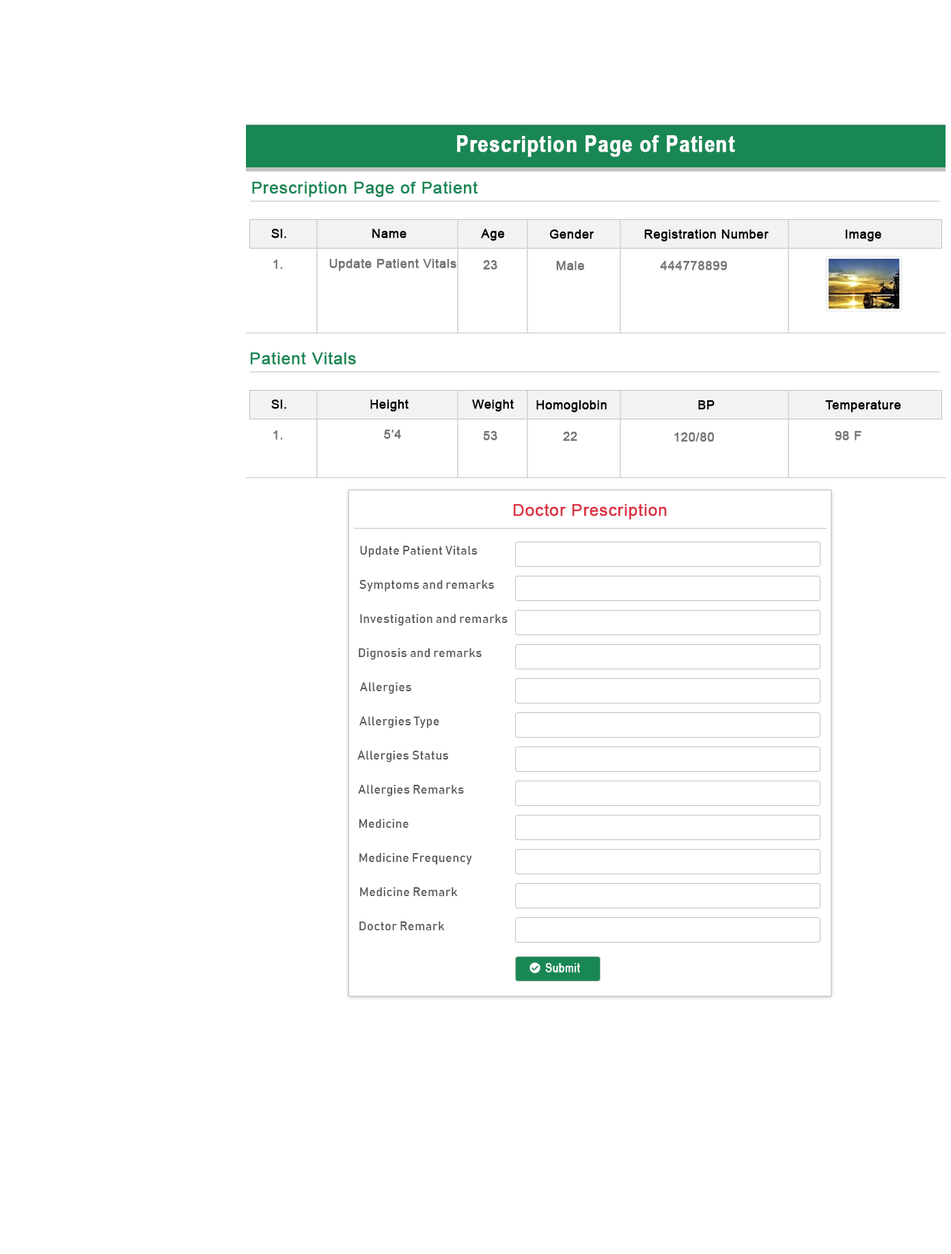
<style>
.page{position:relative;width:951px;height:1254px;background:#ffffff}
.page>*{position:absolute;margin:0}
.t1{font:22.5px "ArialNarrow-Bold";letter-spacing:0.025em;color:#ffffff;font-weight:bold}
.t2{font:16.4px "ArialMT";letter-spacing:0.025em;color:#198754;font-weight:bold}
.t3{font:12.3px "ArialMT";letter-spacing:0.025em;color:#000000;font-weight:bold}
.t4{font:12.3px "ArialMT";letter-spacing:0.025em;color:#737373;font-weight:bold}
.t5{font:16.4px "ArialMT";letter-spacing:0.025em;color:#dc3545;font-weight:bold}
.t6{font:12.3px "Bahnschrift";letter-spacing:0.025em;color:#585757;font-weight:bold}
.t7{font:12.3px "ArialNarrow";letter-spacing:0.025em;color:#ffffff;font-weight:bold}
</style>
<div class="page">
<p class="t1" style="left:457px;top:135px;width:278px;height:22px">Prescription Page of Patient</p>
<p class="t2" style="left:252px;top:181px;width:226px;height:16px">Prescription Page of Patient</p>
<p class="t3" style="left:271px;top:229px;width:15px;height:9px">Sl.</p>
<p class="t3" style="left:372px;top:229px;width:34px;height:9px">Name</p>
<p class="t3" style="left:481px;top:229px;width:24px;height:12px">Age</p>
<p class="t3" style="left:549px;top:230px;width:45px;height:9px">Gender</p>
<p class="t3" style="left:644px;top:230px;width:124px;height:12px">Registration Number</p>
<p class="t3" style="left:845px;top:230px;width:36px;height:12px">Image</p>
<p class="t4" style="left:273px;top:260px;width:10px;height:9px">1.</p>
<p class="t4" style="left:329px;top:259px;width:127px;height:12px">Update Patient Vitals</p>
<p class="t4" style="left:483px;top:260px;width:14px;height:10px">23</p>
<p class="t4" style="left:556px;top:261px;width:29px;height:9px">Male</p>
<p class="t4" style="left:660px;top:261px;width:67px;height:9px">444778899</p>
<p class="t2" style="left:250px;top:352px;width:106px;height:13px">Patient Vitals</p>
<p class="t3" style="left:271px;top:400px;width:15px;height:9px">Sl.</p>
<p class="t3" style="left:370px;top:400px;width:38px;height:12px">Height</p>
<p class="t3" style="left:472px;top:400px;width:42px;height:12px">Weight</p>
<p class="t3" style="left:536px;top:400px;width:71px;height:13px">Homoglobin</p>
<p class="t3" style="left:698px;top:400px;width:16px;height:10px">BP</p>
<p class="t3" style="left:825px;top:400px;width:76px;height:13px">Temperature</p>
<p class="t4" style="left:273px;top:430px;width:10px;height:10px">1.</p>
<p class="t4" style="left:384px;top:430px;width:17px;height:9px">5’4</p>
<p class="t4" style="left:483px;top:431px;width:14px;height:10px">53</p>
<p class="t4" style="left:563px;top:432px;width:14px;height:9px">22</p>
<p class="t4" style="left:674px;top:432px;width:40px;height:10px">120/80</p>
<p class="t4" style="left:835px;top:431px;width:26px;height:10px">98 F</p>
<p class="t5" style="left:513px;top:503px;width:154px;height:17px">Doctor Prescription</p>
<p class="t6" style="left:360px;top:546px;width:117px;height:11px">Update Patient Vitals</p>
<p class="t6" style="left:359px;top:580px;width:135px;height:12px">Symptoms and remarks</p>
<p class="t6" style="left:360px;top:614px;width:148px;height:12px">Investigation and remarks</p>
<p class="t6" style="left:359px;top:648px;width:123px;height:12px">Dignosis and remarks</p>
<p class="t6" style="left:360px;top:682px;width:51px;height:12px">Allergies</p>
<p class="t6" style="left:359px;top:717px;width:80px;height:11px">Allergies Type</p>
<p class="t6" style="left:357px;top:751px;width:91px;height:11px">Allergies Status</p>
<p class="t6" style="left:358px;top:785px;width:106px;height:11px">Allergies Remarks</p>
<p class="t6" style="left:359px;top:819px;width:49px;height:10px">Medicine</p>
<p class="t6" style="left:359px;top:853px;width:113px;height:12px">Medicine Frequency</p>
<p class="t6" style="left:360px;top:887px;width:98px;height:10px">Medicine Remark</p>
<p class="t6" style="left:359px;top:921px;width:86px;height:10px">Doctor Remark</p>
<p class="t7" style="left:545px;top:963px;width:35px;height:10px">Submit</p>
</div>
